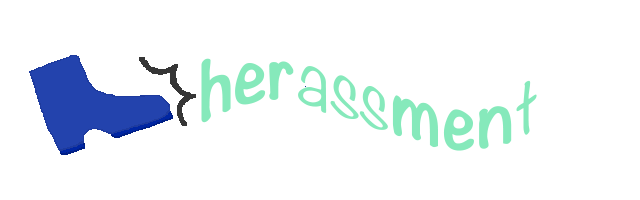
<style>
.page{position:relative;width:640px;height:200px;background:#ffffff}
.page>*{position:absolute;margin:0}
.t1{font:72px "Noteworthy-Bold";color:#86e9bb}
.t2{font:72px "Noteworthy-Light";color:#86e9bb}
</style>
<div class="page">
<p class="t1" style="left:201px;top:58px;width:336px;height:93px">her<span class="t2">ass</span>men<span class="t2">t</span></p>
</div>
